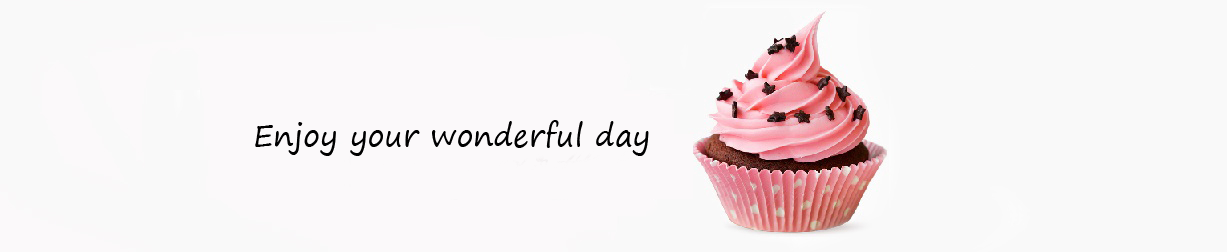
<style>
.page{position:relative;width:1227px;height:252px;background:#f9f9f9}
.page>*{position:absolute;margin:0}
.t1{font:30px "SegoePrint";color:#000000}
</style>
<div class="page">
<p class="t1" style="left:255px;top:120px;width:394px;height:36px">Enjoy your wonderful day</p>
</div>
